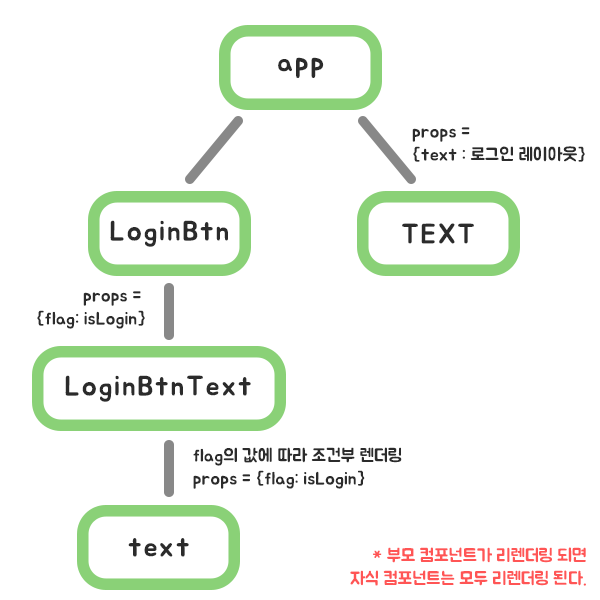
<style>
.page{position:relative;width:600px;height:600px;background:#ffffff}
.page>*{position:absolute;margin:0}
.t1{font:28px "BMJUA";letter-spacing:0.06em;color:#2b2b2b}
.t2{font:18px/23px "BMJUA";color:#2b2b2b}
.t3{font:18px/23px "BMJUA";color:#ff5555}
</style>
<div class="page">
<p class="t1" style="left:278px;top:57px;width:46px;height:21px">app</p>
<p class="t2" style="left:412px;top:127px;width:173px;height:35px">props = <br>{text : 로그인 레이아웃}</p>
<p class="t1" style="left:110px;top:220px;width:118px;height:27px">LoginBtn</p>
<p class="t1" style="left:402px;top:223px;width:72px;height:21px">TEXT</p>
<p class="t2" style="left:37px;top:291px;width:108px;height:38px;text-align:right">props = <br>{flag: isLogin}</p>
<p class="t1" style="left:65px;top:375px;width:186px;height:27px">LoginBtnText</p>
<p class="t2" style="left:193px;top:447px;width:209px;height:42px">flag의 값에 따라 조건부 렌더링<br>props = {flag: isLogin}</p>
<p class="t1" style="left:128px;top:538px;width:61px;height:19px">text</p>
<p class="t3" style="left:350px;top:547px;width:236px;height:39px;text-align:right">* 부모 컴포넌트가 리렌더링 되면<br>자식 컴포넌트는 모두 리렌더링 된다.</p>
</div>
